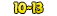
<style>
.page{position:relative;width:57px;height:16px;background:#ffffff}
.page>*{position:absolute;margin:0}
.t1{font:14.1px "VampireBride"}
</style>
<div class="page">
<p class="t1" style="left:14px;top:2px;width:29px;height:12px">10~13</p>
</div>
